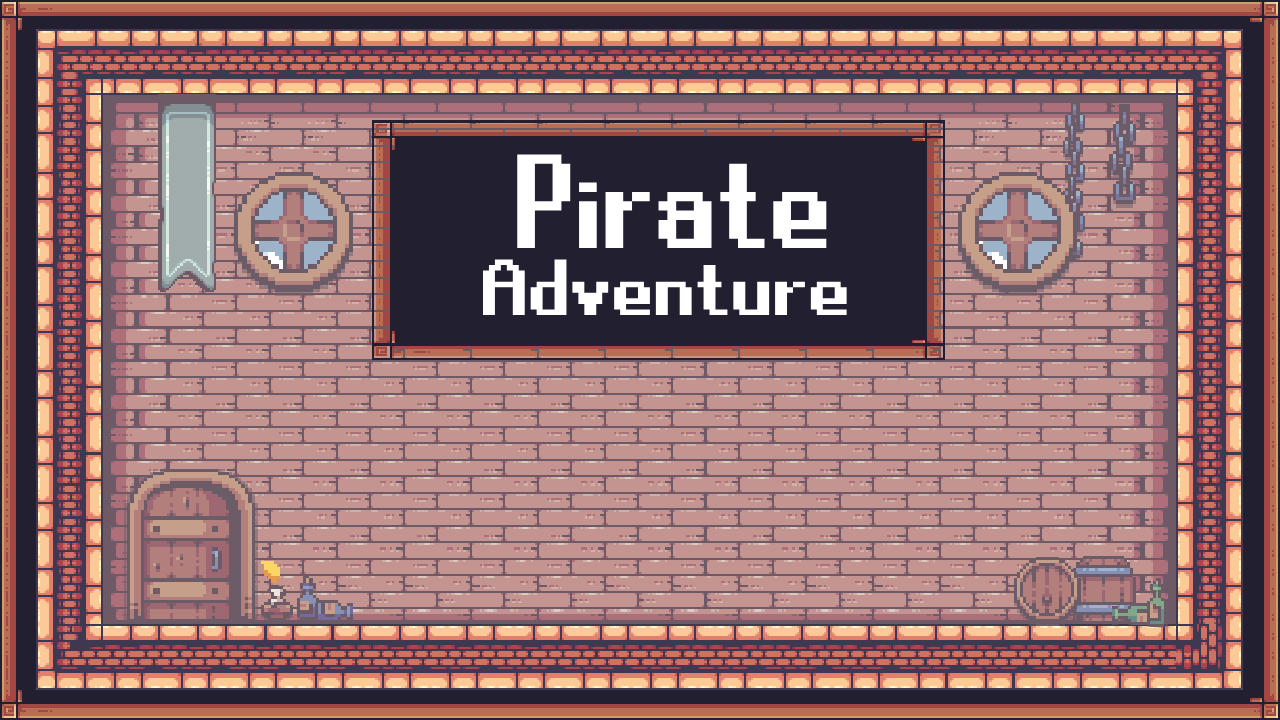
<style>
.page{position:relative;width:1280px;height:720px;background:#c39490}
.page>*{position:absolute;margin:0}
.t1{font:149.7px "RuneScape-UF";color:#ffffff;scale:0.94 1}
.t2{font:88.9px "RuneScape-UF";color:#ffffff;scale:1.07 1}
</style>
<div class="page">
<p class="t1" style="left:517px;top:154px;width:310px;height:94px">Pirate</p>
<p class="t2" style="left:482px;top:259px;width:365px;height:56px">Adventure</p>
</div>
